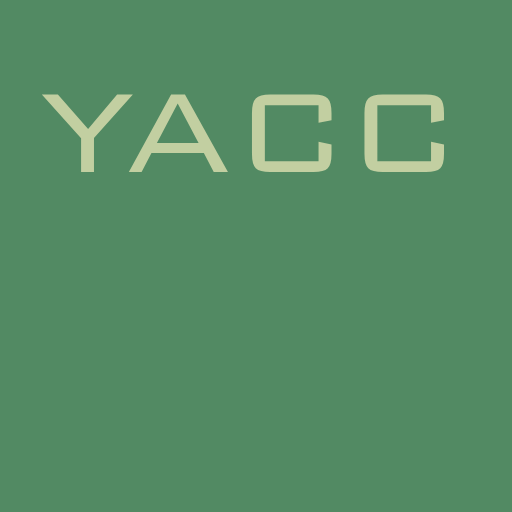
<style>
.page{position:relative;width:512px;height:512px;background:#528a63}
.page>*{position:absolute;margin:0}
.t1{font:150px "BankGothicBT-Light";color:#c2cfa1}
</style>
<div class="page">
<p class="t1" style="left:41px;top:94px;width:404px;height:78px">YACC</p>
</div>
